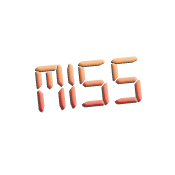
<style>
.page{position:relative;width:175px;height:175px;background:#ffffff}
.page>*{position:absolute;margin:0}
.t1{font:69px "Digital-7"}
</style>
<div class="page">
<p class="t1" style="left:36px;top:56px;width:106px;height:56px;rotate:-6deg">MISS</p>
</div>
